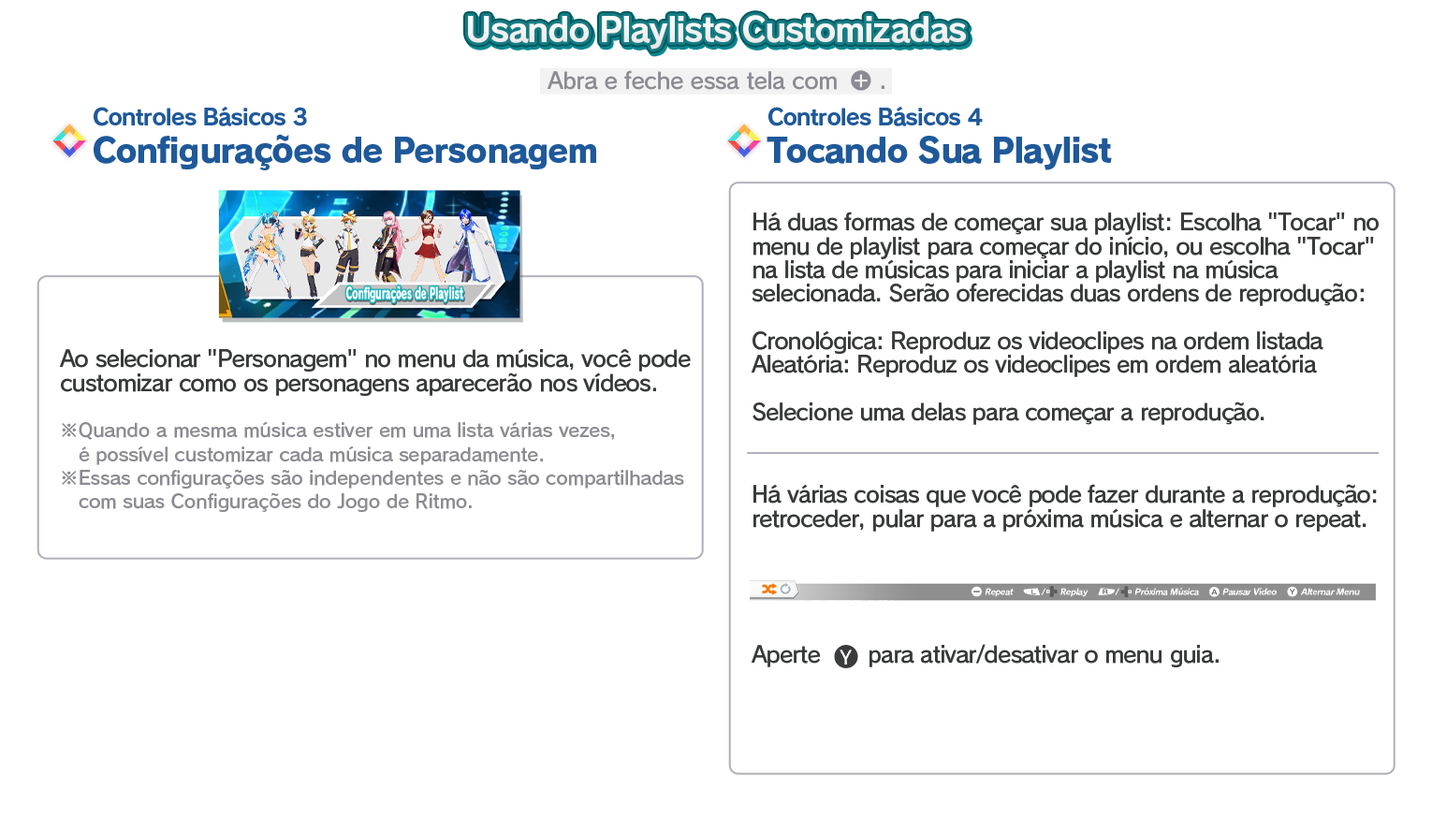
<style>
.page{position:relative;width:1432px;height:833px;background:#ffffff}
.page>*{position:absolute;margin:0}
.t1{font:33.7px "RodinPro-B";letter-spacing:-0.039em;color:#f2f2f3}
.t2{font:22.5px "RodinPro-DB";letter-spacing:-0.025em;color:#8c8b93}
.t3{font:22.5px "RodinPro-B";letter-spacing:-0.039em;color:#1f599a}
.t4{font:33.7px "RodinPro-EB";letter-spacing:-0.04em;color:#1f599a}
.t5{font:22.5px/23.7px "RodinPro-DB";letter-spacing:-0.04em;color:#383a3a}
.t6{font:18.7px/23.7px "RodinPro-DB";letter-spacing:-0.014em;color:#8c8b92}
.t7{font:22.5px "RodinPro-DB";letter-spacing:-0.04em;color:#383a3a}
</style>
<div class="page">
<p class="t1" style="left:468px;top:15px;width:498px;height:35px">Usando Playlists Customizadas</p>
<p class="t2" style="left:547px;top:70px;width:290px;height:20px">Abra e feche essa tela com</p>
<p class="t2" style="left:881px;top:85px;width:3px;height:4px">.</p>
<p class="t3" style="left:94px;top:106px;width:213px;height:20px">Controles Básicos 3</p>
<p class="t3" style="left:768px;top:106px;width:215px;height:20px">Controles Básicos 4</p>
<p class="t4" style="left:94px;top:134px;width:502px;height:36px">Configurações de Personagem</p>
<p class="t4" style="left:766px;top:136px;width:346px;height:34px">Tocando Sua Playlist</p>
<p class="t5" style="left:751px;top:211px;width:627px;height:214px">Há duas formas de começar sua playlist: Escolha "Tocar" no<br>menu de playlist para começar do início, ou escolha "Tocar"<br>na lista de músicas para iniciar a playlist na música<br>selecionada. Serão oferecidas duas ordens de reprodução:<br><br>Cronológica: Reproduz os videoclipes na ordem listada<br>Aleatória: Reproduz os videoclipes em ordem aleatória<br><br>Selecione uma delas para começar a reprodução.</p>
<p class="t5" style="left:60px;top:348px;width:631px;height:48px">Ao selecionar "Personagem" no menu da música, você pode<br>customizar como os personagens aparecerão nos vídeos.</p>
<p class="t6" style="left:62px;top:421px;width:622px;height:91px">※Quando a mesma música estiver em uma lista várias vezes,<br>   é possível customizar cada música separadamente.<br>※Essas configurações são independentes e não são compartilhadas<br>   com suas Configurações do Jogo de Ritmo.</p>
<p class="t5" style="left:753px;top:484px;width:624px;height:48px">Há várias coisas que você pode fazer durante a reprodução:<br>retroceder, pular para a próxima música e alternar o repeat.</p>
<p class="t7" style="left:751px;top:644px;width:467px;height:23px">Aperte       para ativar/desativar o menu guia.</p>
</div>
